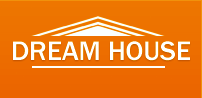
<style>
.page{position:relative;width:202px;height:98px}
.page>*{position:absolute;margin:0}
.t1{font:27.8px "FranklinGothic-Medium";color:#ffffff}
</style>
<div class="page">
<p class="t1" style="left:13px;top:41px;width:177px;height:20px">DREAM HOUSE</p>
</div>
